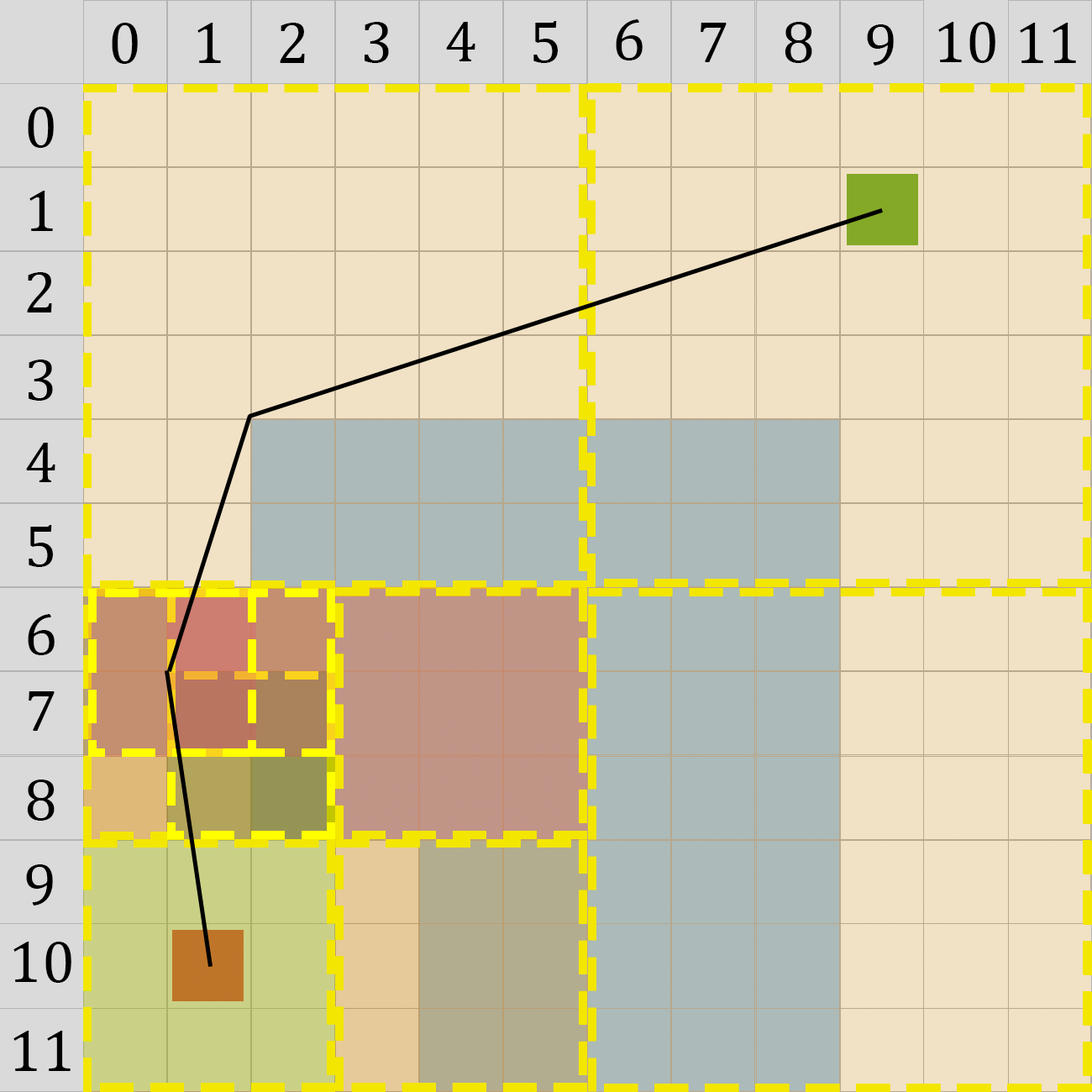
<style>
.page{position:relative;width:1092px;height:1092px;background:#f1e1c5}
.page>*{position:absolute;margin:0}
.t1{font:59.3px "Cambria";color:#000000}
</style>
<div class="page">
<p class="t1" style="left:112px;top:23px;width:26px;height:41px">0</p>
<p class="t1" style="left:197px;top:23px;width:24px;height:40px">1</p>
<p class="t1" style="left:280px;top:23px;width:25px;height:40px">2</p>
<p class="t1" style="left:365px;top:22px;width:24px;height:41px">3</p>
<p class="t1" style="left:446px;top:22px;width:29px;height:39px">4</p>
<p class="t1" style="left:533px;top:21px;width:25px;height:42px">5</p>
<p class="t1" style="left:616px;top:19px;width:27px;height:41px">6</p>
<p class="t1" style="left:701px;top:23px;width:26px;height:39px">7</p>
<p class="t1" style="left:785px;top:22px;width:27px;height:41px">8</p>
<p class="t1" style="left:867px;top:24px;width:27px;height:42px">9</p>
<p class="t1" style="left:938px;top:22px;width:57px;height:41px">10</p>
<p class="t1" style="left:1020px;top:23px;width:56px;height:40px">11</p>
<p class="t1" style="left:28px;top:107px;width:26px;height:41px">0</p>
<p class="t1" style="left:29px;top:191px;width:24px;height:40px">1</p>
<p class="t1" style="left:27px;top:272px;width:25px;height:40px">2</p>
<p class="t1" style="left:29px;top:360px;width:24px;height:41px">3</p>
<p class="t1" style="left:26px;top:443px;width:29px;height:39px">4</p>
<p class="t1" style="left:29px;top:525px;width:24px;height:42px">5</p>
<p class="t1" style="left:28px;top:614px;width:27px;height:41px">6</p>
<p class="t1" style="left:29px;top:691px;width:26px;height:40px">7</p>
<p class="t1" style="left:27px;top:780px;width:28px;height:41px">8</p>
<p class="t1" style="left:26px;top:864px;width:27px;height:42px">9</p>
<p class="t1" style="left:13px;top:942px;width:58px;height:41px">10</p>
<p class="t1" style="left:13px;top:1031px;width:58px;height:40px">11</p>
</div>
